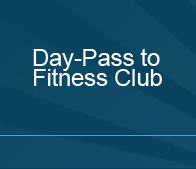
<style>
.page{position:relative;width:196px;height:169px;background:#0a4360}
.page>*{position:absolute;margin:0}
.t1{font:24px/20px "ArialMT";letter-spacing:-0.01em;color:#ffffff}
</style>
<div class="page">
<p class="t1" style="left:33px;top:48px;width:129px;height:38px">Day-Pass to<br>Fitness Club</p>
</div>
